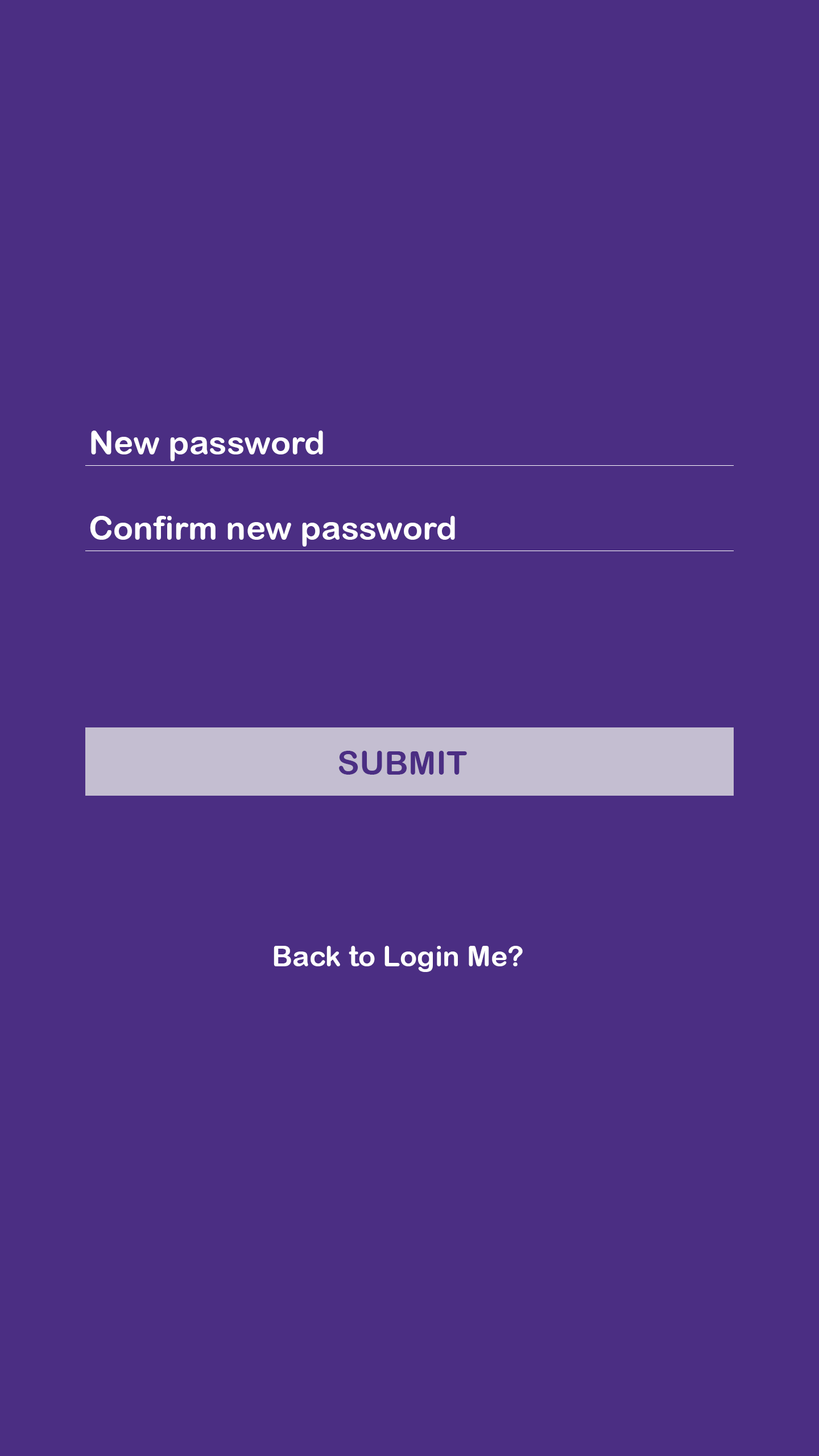
<style>
.page{position:relative;width:819px;height:1456px;background:#4b2e83}
.page>*{position:absolute;margin:0}
.t1{font:33.2px "ArialRoundedMTBold";color:#ffffff}
.t2{font:33.2px "ArialRoundedMTBold";color:#4b2e83}
.t3{font:28.4px "ArialRoundedMTBold";color:#ffffff}
</style>
<div class="page">
<p class="t1" style="left:91px;top:431px;width:232px;height:30px">New password</p>
<p class="t1" style="left:90px;top:516px;width:365px;height:31px">Confirm new password</p>
<p class="t2" style="left:339px;top:751px;width:128px;height:24px">SUBMIT</p>
<p class="t3" style="left:274px;top:946px;width:249px;height:26px">Back to Login Me?</p>
</div>
